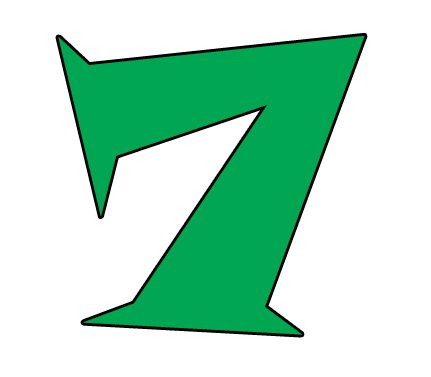
<style>
.page{position:relative;width:431px;height:377px;background:#ffffff}
.page>*{position:absolute;margin:0}
.t1{font:400px "SnapITC-Regular";color:#00a651}
</style>
<div class="page">
<p class="t1" style="left:58px;top:35px;width:307px;height:300px">7</p>
</div>
